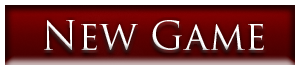
<style>
.page{position:relative;width:300px;height:70px}
.page>*{position:absolute;margin:0}
.t1{font:38.9px "TrajanPro-Regular";color:#ffffff}
</style>
<div class="page">
<p class="t1" style="left:44px;top:20px;width:220px;height:30px">New Game</p>
</div>
